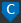
<style>
.page{position:relative;width:21px;height:23px;background:#006fba}
.page>*{position:absolute;margin:0}
.t1{font:14px "Ubuntu";color:#ffffff}
</style>
<div class="page">
<p class="t1" style="left:6px;top:4px;width:9px;height:10px">C</p>
</div>
